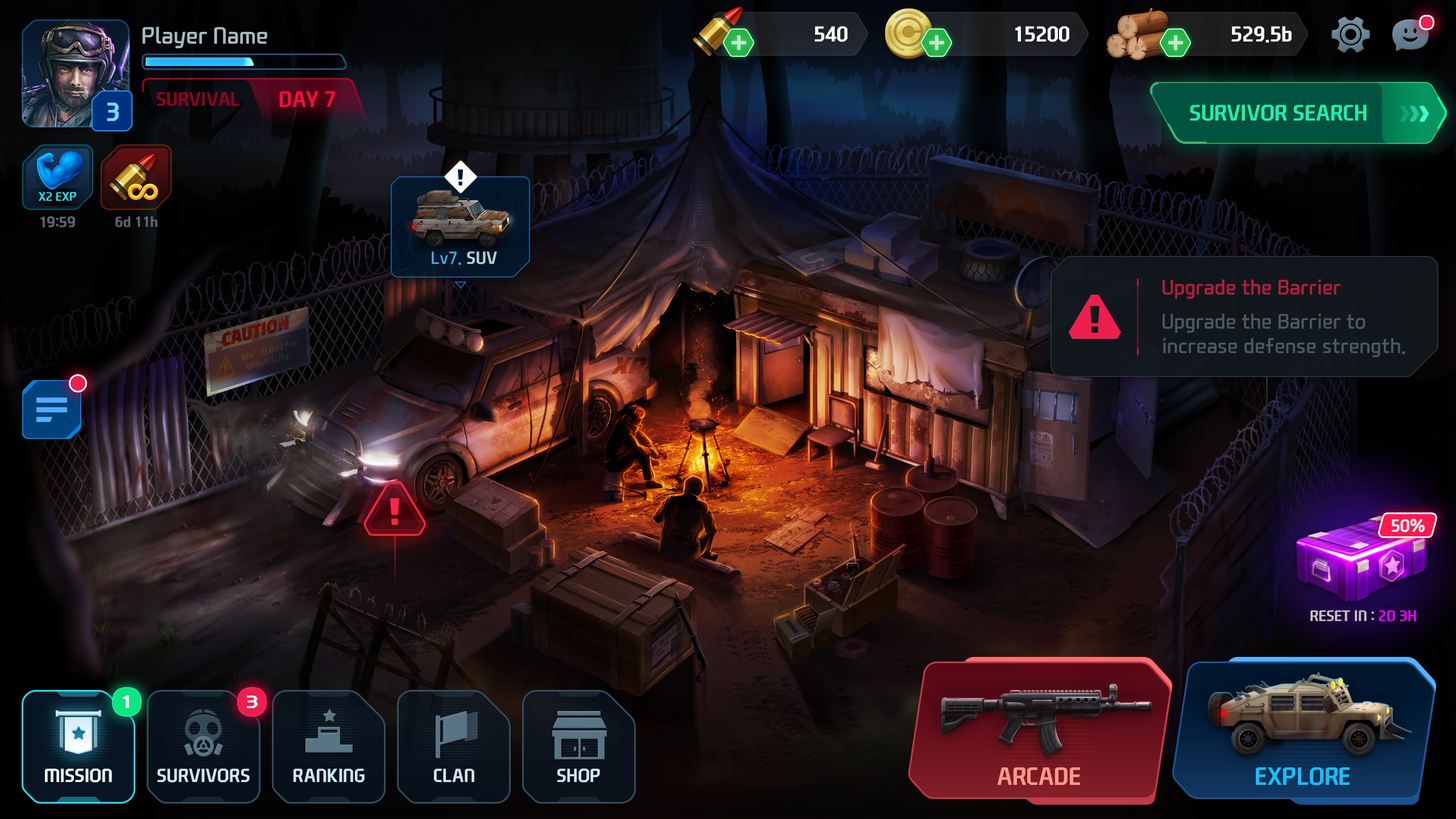
<style>
.page{position:relative;width:1456px;height:819px}
.page>*{position:absolute;margin:0}
.t1{font:22.7px "NEXONFootballGothicL";color:#a7bcc2}
.t2{font:20.7px "NEXONFootballGothicB";color:#ffffff;text-transform:uppercase}
.t3{font:20.7px "NEXONFootballGothicB";color:#ffffff}
.t4{font:18.8px "NEXONFootballGothicB";color:#900025;text-transform:uppercase}
.t5{font:21.6px "NEXONFootballGothicB";color:#ff0a38;text-transform:uppercase}
.t6{font:25px "NEXONFootballGothicB";color:#73dcff}
.t7{font:21.6px "NEXONFootballGothicB";color:#23edaa;text-transform:uppercase}
.t8{font:12px "NEXONFootballGothicB";color:#1fe2f5;text-transform:uppercase}
.t9{font:14.2px "NEXONFootballGothicL";color:#636479;text-transform:uppercase;font-weight:bold}
.t10{font:14.2px "NEXONFootballGothicB";color:#636479}
.t11{font:17.1px "NEXONFootballGothicL";color:#40b2dc}
.t12{font:17.1px "NEXONFootballGothicB";color:#bccbd0}
.t13{font:20.5px "NEXONFootballGothicL";color:#b71d41}
.t14{font:20.5px "NEXONFootballGothicL";color:#495964}
.t15{font:17.1px "NEXONFootballGothicB";color:#ffffff;text-transform:uppercase}
.t16{font:14.8px "NEXONFootballGothicB";color:#d6bbc7;text-transform:uppercase}
.t17{font:14.8px "NEXONFootballGothicB";color:#e600ff;text-transform:uppercase}
.t18{font:17.2px "NEXONFootballGothicB";color:#ffffff;text-transform:uppercase;scale:1.37 1}
.t19{font:18.2px "NEXONFootballGothicB";color:#f2faff;text-transform:uppercase}
.t20{font:18.2px "NEXONFootballGothicB";color:#f2faff;font-variant:small-caps}
.t21{font:18.2px "NEXONFootballGothicB";color:#cfe7f7;text-transform:uppercase}
.t22{font:24px "NEXONFootballGothicB";color:#ff998b;text-transform:uppercase}
.t23{font:24px "NEXONFootballGothicB";color:#12c0ff;text-transform:uppercase}
</style>
<div class="page">
<p class="t1" style="left:142px;top:27px;width:125px;height:21px">Player Name</p>
<p class="t2" style="left:814px;top:26px;width:33px;height:16px">540</p>
<p class="t2" style="left:1015px;top:26px;width:54px;height:16px">15200</p>
<p class="t3" style="left:1231px;top:26px;width:61px;height:17px">529.5b</p>
<p class="t4" style="left:156px;top:92px;width:83px;height:14px">Survival</p>
<p class="t5" style="left:279px;top:91px;width:56px;height:16px">Day 7</p>
<p class="t6" style="left:107px;top:102px;width:12px;height:19px">3</p>
<p class="t7" style="left:1190px;top:105px;width:177px;height:16px">Survivor search</p>
<p class="t8" style="left:39px;top:192px;width:37px;height:9px">x2 exp</p>
<p class="t9" style="left:40px;top:216px;width:35px;height:11px">19:59</p>
<p class="t10" style="left:115px;top:216px;width:43px;height:11px">6d 11h</p>
<p class="t11" style="left:432px;top:251px;width:65px;height:14px">Lv7. <span class="t12">SUV</span></p>
<p class="t13" style="left:1163px;top:279px;width:178px;height:20px">Upgrade the Barrier</p>
<p class="t14" style="left:1163px;top:313px;width:242px;height:44px">Upgrade the Barrier to <br>increase defense strength.</p>
<p class="t15" style="left:1392px;top:519px;width:33px;height:13px">50%</p>
<p class="t16" style="left:1310px;top:610px;width:106px;height:11px">reset in : <span class="t17">2d 3h</span></p>
<p class="t18" style="left:123px;top:696px;width:6px;height:12px">1</p>
<p class="t18" style="left:247px;top:696px;width:11px;height:12px">3</p>
<p class="t19" style="left:45px;top:768px;width:67px;height:15px">mission</p>
<p class="t20" style="left:45px;top:768px;width:67px;height:15px">MISSION</p>
<p class="t21" style="left:158px;top:768px;width:92px;height:15px">SURVIVORS</p>
<p class="t21" style="left:293px;top:768px;width:72px;height:15px">Ranking</p>
<p class="t21" style="left:434px;top:768px;width:40px;height:14px">clan</p>
<p class="t21" style="left:557px;top:768px;width:43px;height:15px">Shop</p>
<p class="t22" style="left:997px;top:767px;width:83px;height:18px">Arcade</p>
<p class="t23" style="left:1256px;top:767px;width:94px;height:18px">EXPLORE</p>
</div>
